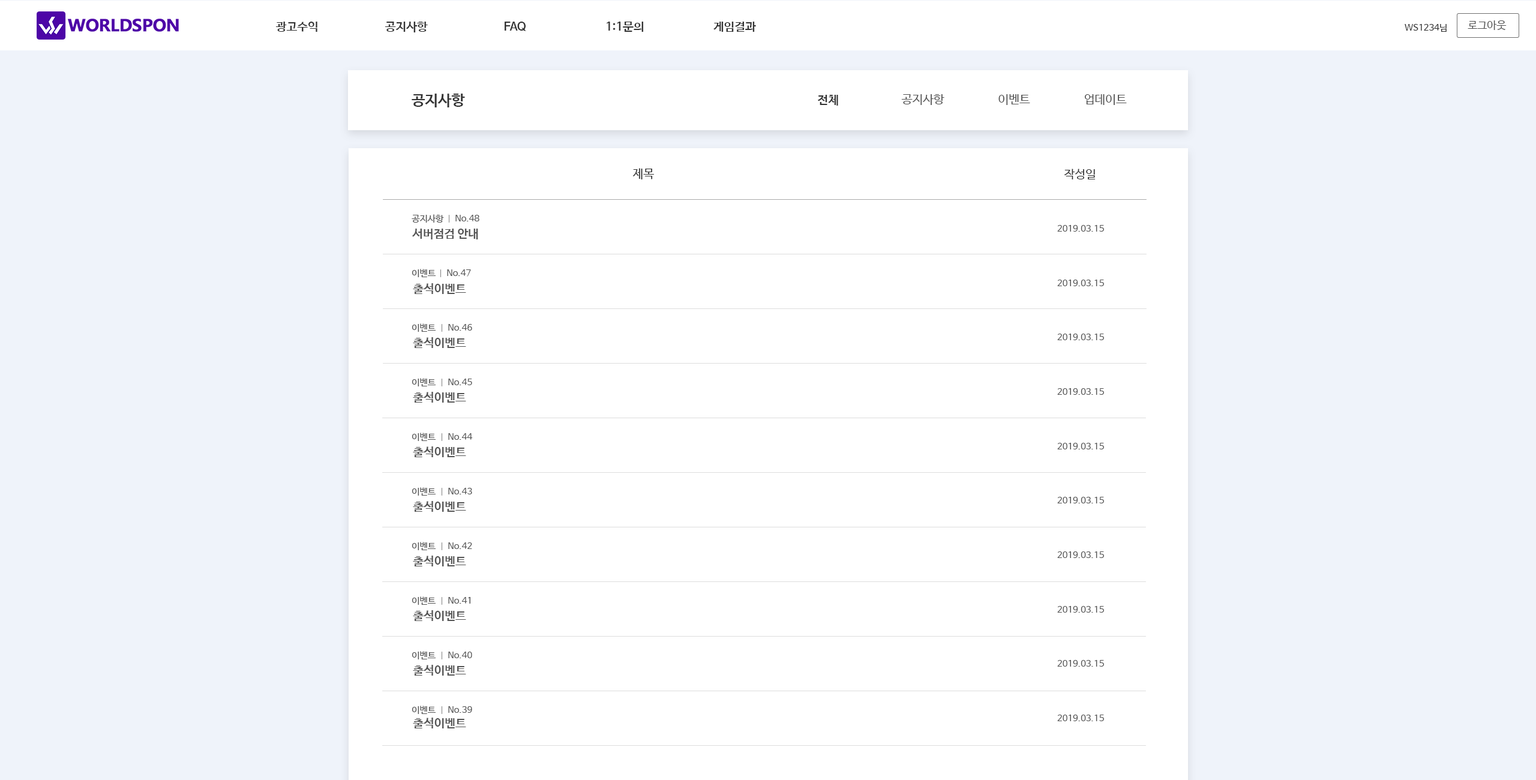
<style>
.page{position:relative;width:1536px;height:780px;background:#ffffff}
.page>*{position:absolute;margin:0}
.t1{font:12px "NanumBarunGothicBold";color:#333333;text-transform:uppercase}
.t2{font:9px "NanumBarunGothic";color:#333333;text-transform:uppercase}
.t3{font:10.8px "NanumBarunGothic";color:#555555;text-transform:uppercase}
.t4{font:15px "NanumBarunGothicBold";color:#333333;text-transform:uppercase}
.t5{font:12px "NanumBarunGothic";color:#555555;text-transform:uppercase}
.t6{font:12px "NanumBarunGothic";color:#333333;text-transform:uppercase}
.t7{font:9px "NanumBarunGothic";color:#555555;text-transform:uppercase}
.t8{font:9px "NanumBarunGothic";color:#555555}
.t9{font:12px "NanumBarunGothicBold";color:#555555;text-transform:uppercase}
</style>
<div class="page">
<p class="t1" style="left:276px;top:22px;width:41px;height:10px">광고수익</p>
<p class="t1" style="left:385px;top:22px;width:43px;height:10px">공지사항</p>
<p class="t1" style="left:505px;top:22px;width:21px;height:9px">faq</p>
<p class="t1" style="left:607px;top:22px;width:36px;height:10px">1:1문의</p>
<p class="t1" style="left:713px;top:22px;width:43px;height:10px">게임결과</p>
<p class="t2" style="left:1405px;top:24px;width:42px;height:8px">ws1234님</p>
<p class="t3" style="left:1468px;top:20px;width:39px;height:10px">로그아웃</p>
<p class="t4" style="left:412px;top:94px;width:53px;height:13px">공지사항</p>
<p class="t1" style="left:817px;top:95px;width:21px;height:11px">전체</p>
<p class="t5" style="left:901px;top:94px;width:43px;height:11px">공지사항</p>
<p class="t5" style="left:998px;top:94px;width:32px;height:11px">이벤트</p>
<p class="t5" style="left:1084px;top:94px;width:43px;height:11px">업데이트</p>
<p class="t6" style="left:632px;top:168px;width:22px;height:11px">제목</p>
<p class="t6" style="left:1064px;top:169px;width:32px;height:10px">작성일</p>
<p class="t7" style="left:412px;top:214px;width:32px;height:9px">공지사항</p>
<p class="t7" style="left:455px;top:215px;width:24px;height:6px">n<span class="t8">o</span>.48</p>
<p class="t9" style="left:412px;top:229px;width:66px;height:10px">서버점검 안내</p>
<p class="t7" style="left:1057px;top:225px;width:47px;height:7px">2019.03.15</p>
<p class="t7" style="left:412px;top:269px;width:24px;height:8px">이벤트</p>
<p class="t7" style="left:447px;top:269px;width:24px;height:8px">n<span class="t8">o</span>.47</p>
<p class="t7" style="left:1057px;top:280px;width:47px;height:6px">2019.03.15</p>
<p class="t9" style="left:413px;top:283px;width:53px;height:11px">출석이벤트</p>
<p class="t7" style="left:412px;top:323px;width:24px;height:9px">이벤트</p>
<p class="t7" style="left:448px;top:324px;width:24px;height:7px">n<span class="t8">o</span>.46</p>
<p class="t9" style="left:413px;top:337px;width:53px;height:11px">출석이벤트</p>
<p class="t7" style="left:1057px;top:334px;width:47px;height:6px">2019.03.15</p>
<p class="t7" style="left:412px;top:378px;width:24px;height:8px">이벤트</p>
<p class="t7" style="left:448px;top:379px;width:24px;height:6px">n<span class="t8">o</span>.45</p>
<p class="t7" style="left:1057px;top:388px;width:47px;height:7px">2019.03.15</p>
<p class="t9" style="left:413px;top:392px;width:53px;height:11px">출석이벤트</p>
<p class="t7" style="left:412px;top:433px;width:24px;height:8px">이벤트</p>
<p class="t7" style="left:448px;top:433px;width:25px;height:7px">n<span class="t8">o</span>.44</p>
<p class="t9" style="left:413px;top:446px;width:53px;height:11px">출석이벤트</p>
<p class="t7" style="left:1057px;top:443px;width:47px;height:6px">2019.03.15</p>
<p class="t7" style="left:412px;top:487px;width:24px;height:9px">이벤트</p>
<p class="t7" style="left:448px;top:488px;width:24px;height:6px">n<span class="t8">o</span>.43</p>
<p class="t7" style="left:1057px;top:497px;width:47px;height:6px">2019.03.15</p>
<p class="t9" style="left:413px;top:501px;width:53px;height:11px">출석이벤트</p>
<p class="t7" style="left:412px;top:542px;width:24px;height:8px">이벤트</p>
<p class="t7" style="left:448px;top:542px;width:24px;height:7px">n<span class="t8">o</span>.42</p>
<p class="t9" style="left:413px;top:556px;width:53px;height:10px">출석이벤트</p>
<p class="t7" style="left:1057px;top:551px;width:47px;height:7px">2019.03.15</p>
<p class="t7" style="left:412px;top:596px;width:24px;height:9px">이벤트</p>
<p class="t7" style="left:448px;top:597px;width:22px;height:7px">n<span class="t8">o</span>.41</p>
<p class="t7" style="left:1057px;top:606px;width:47px;height:7px">2019.03.15</p>
<p class="t9" style="left:413px;top:610px;width:53px;height:11px">출석이벤트</p>
<p class="t7" style="left:412px;top:651px;width:24px;height:8px">이벤트</p>
<p class="t7" style="left:448px;top:652px;width:24px;height:6px">n<span class="t8">o</span>.40</p>
<p class="t9" style="left:413px;top:665px;width:53px;height:11px">출석이벤트</p>
<p class="t7" style="left:1057px;top:660px;width:47px;height:7px">2019.03.15</p>
<p class="t7" style="left:412px;top:706px;width:24px;height:8px">이벤트</p>
<p class="t7" style="left:448px;top:706px;width:24px;height:7px">n<span class="t8">o</span>.39</p>
<p class="t9" style="left:413px;top:718px;width:53px;height:10px">출석이벤트</p>
<p class="t7" style="left:1057px;top:715px;width:47px;height:6px">2019.03.15</p>
</div>
